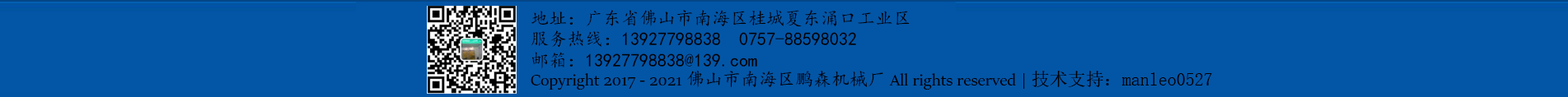
<style>
.page{position:relative;width:1568px;height:97px;background:#0356a6}
.page>*{position:absolute;margin:0}
.t1{font:18.1px "¿¬Ìå";color:#000000}
.t2{font:18.1px "SitkaBanner";color:#000000}
.t3{font:18.1px "SimSun";color:#000000}
</style>
<div class="page">
<p class="t1" style="left:531px;top:10px;width:379px;height:16px">地址：广东省佛山市南海区桂城夏东涌口工业区</p>
<p class="t1" style="left:531px;top:30px;width:325px;height:17px">服务热线：13927798838  0757-88598032</p>
<p class="t1" style="left:531px;top:52px;width:226px;height:17px">邮箱：13927798838@139.com</p>
<p class="t2" style="left:531px;top:71px;width:681px;height:19px">Copyright 2017 - 2021 <span class="t1">佛山市南海区鹏森机械厂</span>All rights reserved | <span class="t3">技术支持：manleo0527</span></p>
</div>
